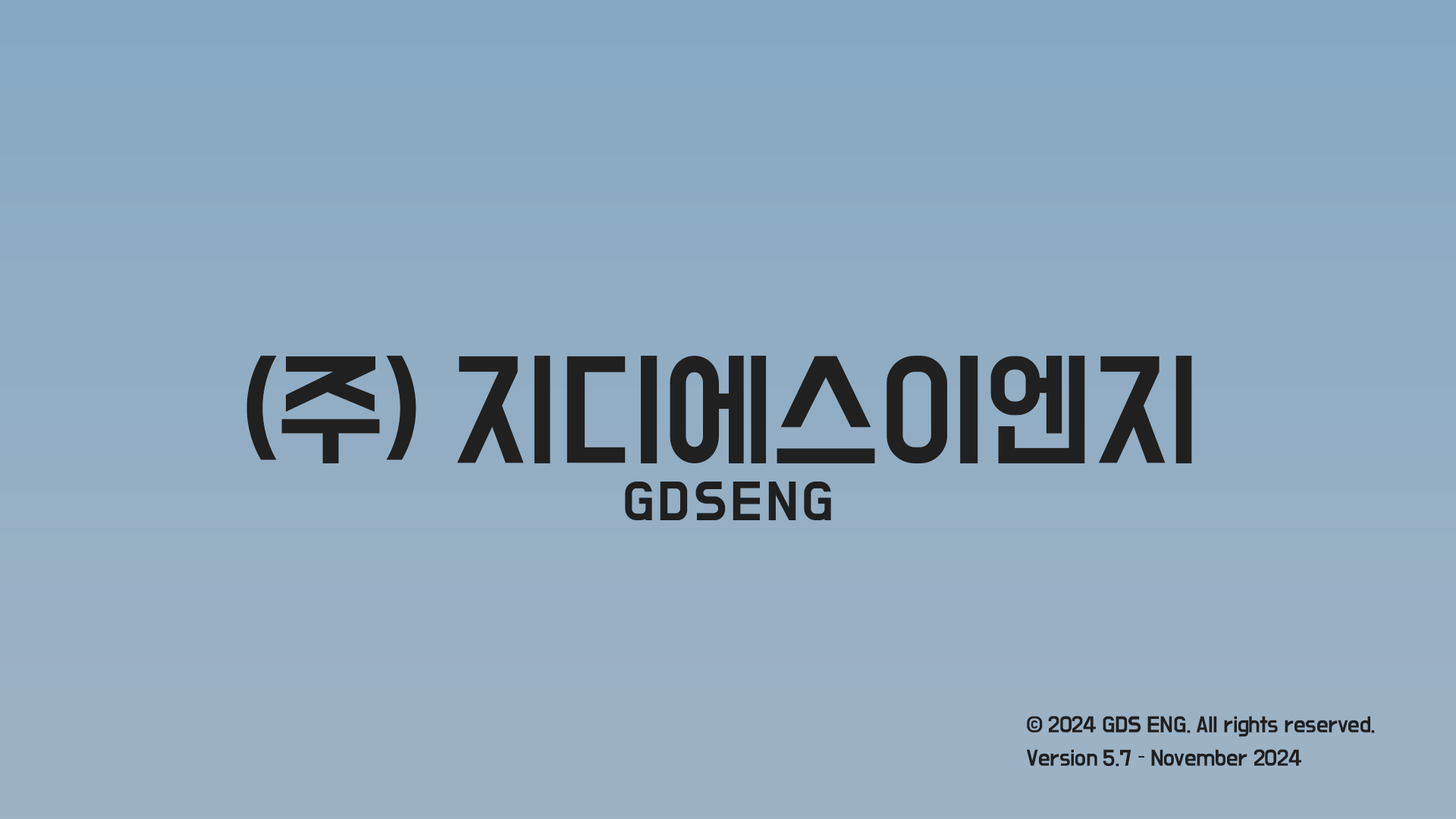
<style>
.page{position:relative;width:1456px;height:819px}
.page>*{position:absolute;margin:0}
.t1{font:113.7px "BMDoHyeon-OTF";letter-spacing:-0.02em;color:#202020}
.t2{font:45.5px "BMDoHyeon-OTF";letter-spacing:0.075em;color:#1f1f1f}
.t3{font:19px "BMDoHyeon-OTF";letter-spacing:-0.02em;color:#1f1f1f}
</style>
<div class="page">
<p class="t1" style="left:246px;top:356px;width:946px;height:108px">(주) 지디에스이엔지</p>
<p class="t2" style="left:625px;top:482px;width:206px;height:38px">GDSENG</p>
<p class="t3" style="left:1026px;top:716px;width:349px;height:51px">© 2024 GDS ENG. All rights reserved.<br>Version 5.7 – November 2024</p>
</div>
